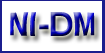
<style>
.page{position:relative;width:105px;height:53px;background:#ffffff}
.page>*{position:absolute;margin:0}
.t1{font:30px "Arial-BoldMT"}
</style>
<div class="page">
<p class="t1" style="left:10px;top:12px;width:85px;height:24px">NI-DM</p>
</div>
